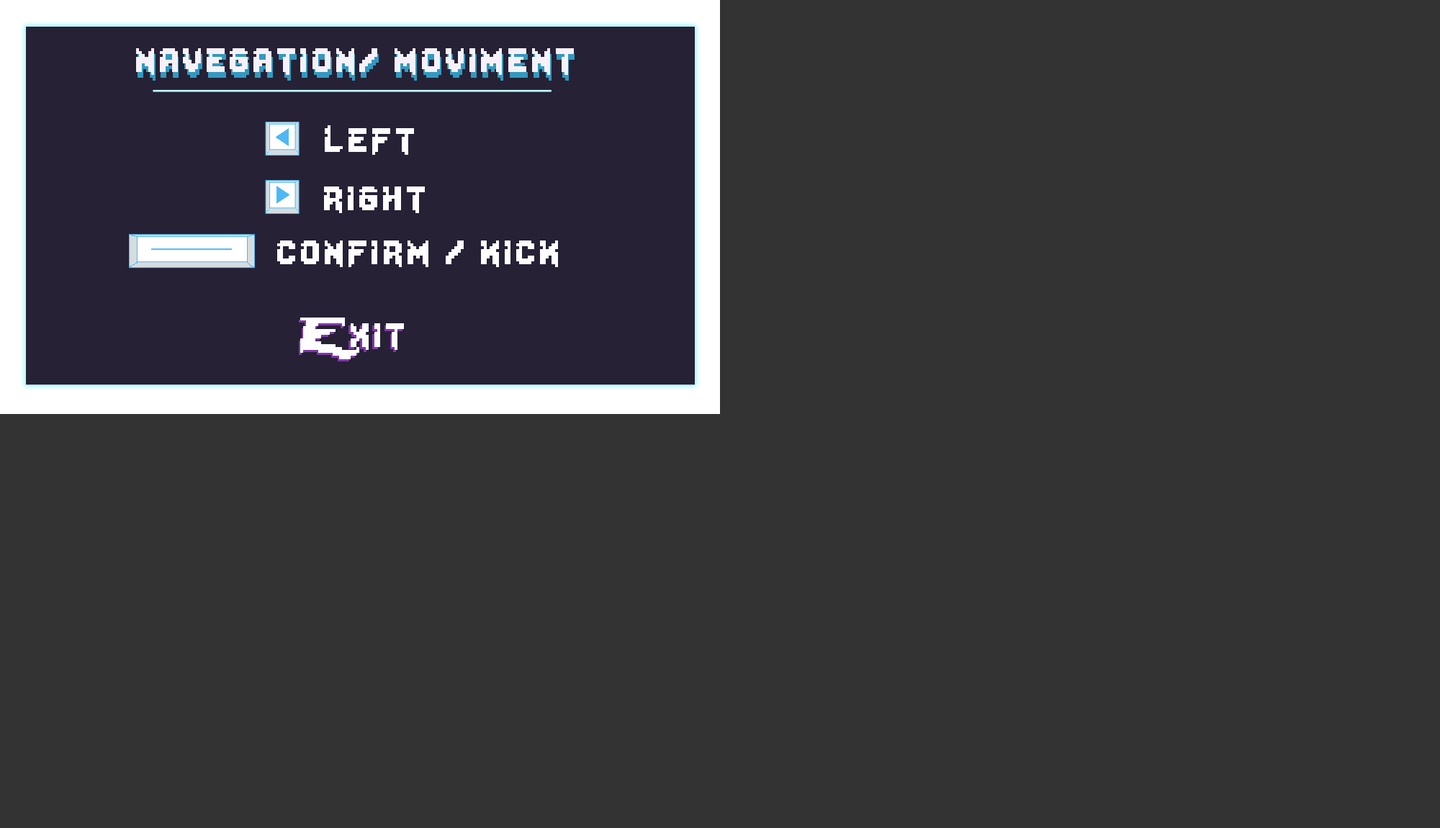
<style>
.page{position:relative;width:1440px;height:828px;background:#333333}
.page>*{position:absolute;margin:0}
.t1{font:47.8px "Lady-Radical";letter-spacing:0.06em;color:#f6f1f8}
.t2{font:47.8px "Lady-Radical";letter-spacing:0.06em}
.t3{font:47.5px "Lady-Radical";letter-spacing:0.06em;color:#fdfdfd}
.t4{font:47.7px "Lady-Radical";letter-spacing:0.06em;color:#fdfdfd}
.t5{font:47.7px "Lady-Radical";letter-spacing:0.06em}
</style>
<div class="page">
<p class="t1" style="left:136px;top:48px;width:438px;height:27px">navegation/ moviment</p>
<p class="t2" style="left:138px;top:54px;width:437px;height:27px">navegation/ moviment</p>
<p class="t3" style="left:325px;top:125px;width:89px;height:30px">left</p>
<p class="t3" style="left:324px;top:186px;width:101px;height:27px">right</p>
<p class="t3" style="left:277px;top:240px;width:281px;height:27px">confirm / kick</p>
<p class="t4" style="left:300px;top:318px;width:104px;height:41px">Exit</p>
<p class="t5" style="left:299px;top:320px;width:103px;height:41px">Exit</p>
</div>
